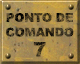
<style>
.page{position:relative;width:80px;height:64px}
.page>*{position:absolute;margin:0}
.t1{font:12px/14.7px "Arial-Black";letter-spacing:-0.015em;text-transform:uppercase}
.t2{font:20px/20px "Arial-Black";letter-spacing:-0.055em;text-transform:uppercase}
</style>
<div class="page">
<p class="t1" style="left:6px;top:13px;width:68px;height:44px;text-align:center">Ponto de<br>comando<br><span class="t2">7</span></p>
</div>
